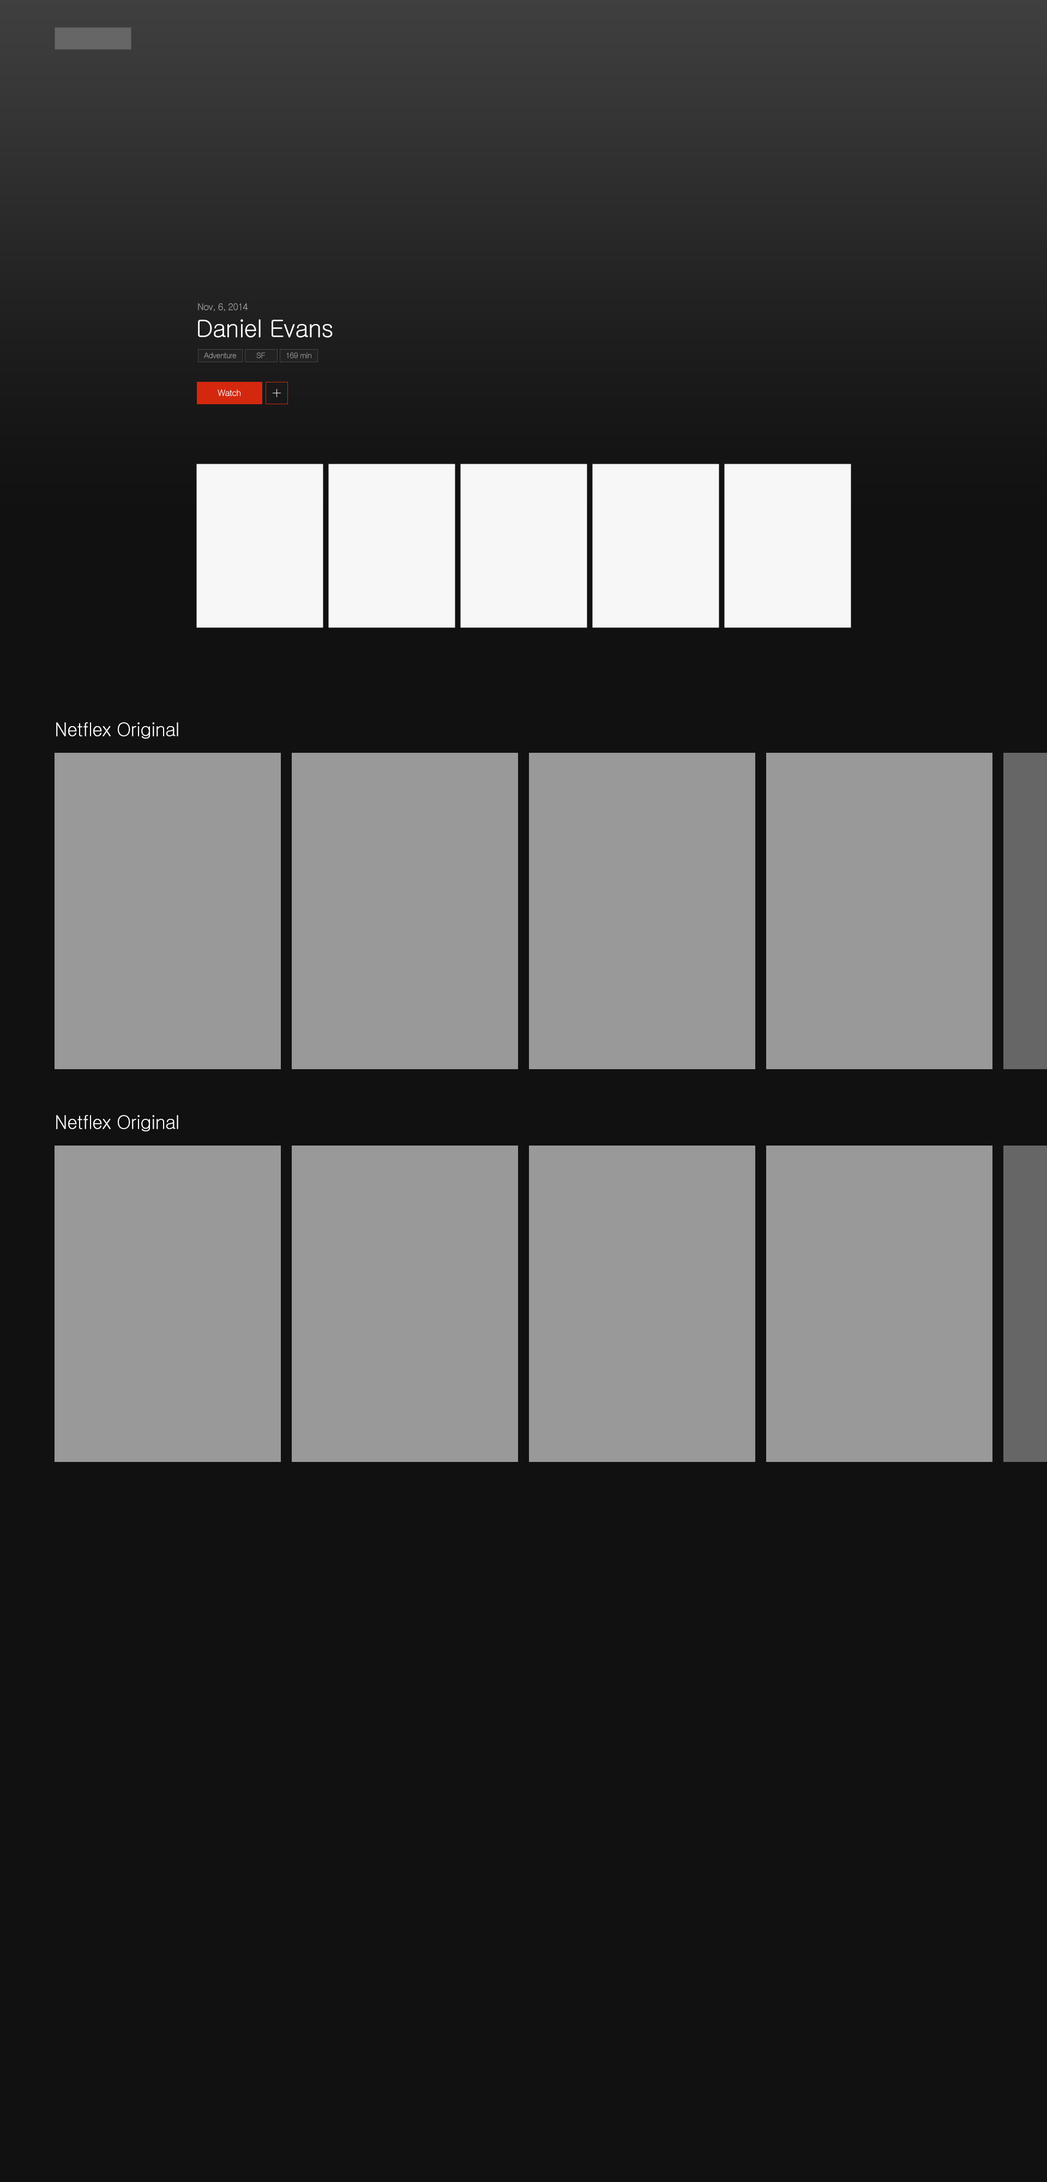
<style>
.page{position:relative;width:1047px;height:2182px;background:#111111}
.page>*{position:absolute;margin:0}
.t1{font:9.3px "Gulim";letter-spacing:-0.05em;color:#aaaaaa}
.t2{font:24px "Gulim";letter-spacing:-0.025em;color:#ffffff}
.t3{font:7.6px "Gulim";letter-spacing:-0.05em;color:#aaaaaa}
.t4{font:8.7px "Gulim";letter-spacing:-0.05em;color:#ffffff}
.t5{font:18.5px "Gulim";letter-spacing:-0.025em;color:#ffffff}
</style>
<div class="page">
<p class="t1" style="left:198px;top:303px;width:50px;height:8px">Nov, 6, 2014</p>
<p class="t2" style="left:198px;top:319px;width:135px;height:19px">Daniel Evans</p>
<p class="t3" style="left:204px;top:352px;width:32px;height:6px">Adventure</p>
<p class="t3" style="left:256px;top:352px;width:9px;height:6px">SF</p>
<p class="t3" style="left:287px;top:352px;width:24px;height:6px">169 min</p>
<p class="t4" style="left:218px;top:389px;width:23px;height:7px">Watch</p>
<p class="t5" style="left:56px;top:722px;width:122px;height:17px">Netflex Original</p>
<p class="t5" style="left:56px;top:1115px;width:122px;height:16px">Netflex Original</p>
</div>
